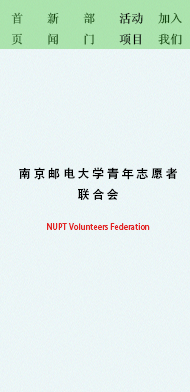
<style>
.page{position:relative;width:190px;height:392px}
.page>*{position:absolute;margin:0}
.t1{font:12px "System"}
.t2{font:12px "System";color:#10410b}
.t3{font:12px "System";color:#000000}
.t4{font:12px "AdobeHeitiStd-Regular";color:#000000}
.t5{font:8px "AdobeHeitiStd-Regular";color:#e22323}
</style>
<div class="page">
<p class="t1" style="left:11px;top:12px;width:12px;height:33px">首<br>页</p>
<p class="t2" style="left:47px;top:12px;width:12px;height:33px">新闻</p>
<p class="t1" style="left:83px;top:12px;width:12px;height:33px">部门</p>
<p class="t3" style="left:119px;top:12px;width:24px;height:33px">活动<br>项目</p>
<p class="t2" style="left:158px;top:12px;width:24px;height:33px">加入<br>我们</p>
<p class="t4" style="left:19px;top:167px;width:158px;height:63px;text-align:center">南 京 邮 电 大 学 青 年 志 愿 者<br>联 合 会<br><br><span class="t5">NUPT Volunteers Federation</span></p>
</div>
